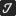
<style>
.page{position:relative;width:16px;height:16px;background:#262626}
.page>*{position:absolute;margin:0}
.t1{font:12px "Wisdom-Script";color:#ffffff}
</style>
<div class="page">
<p class="t1" style="left:2px;top:3px;width:10px;height:10px">T</p>
</div>
